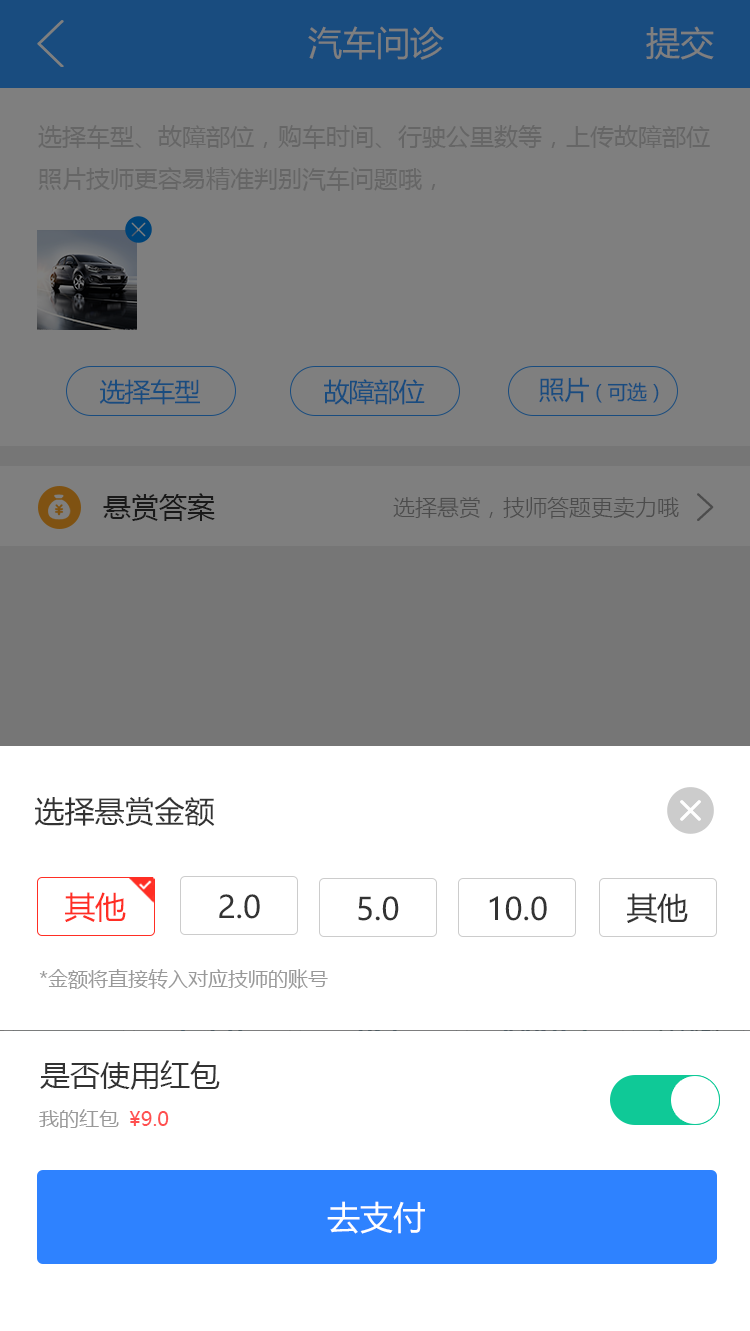
<style>
.page{position:relative;width:750px;height:1331px;background:#ffffff}
.page>*{position:absolute;margin:0}
.t1{font:34px "MicrosoftYaHei";color:#7f7f7f}
.t2{font:24px "MicrosoftYaHei";color:#666666}
.t3{font:20px "MicrosoftYaHei";letter-spacing:-0.04em;color:#194c7f}
.t4{font:26px "MicrosoftYaHei";letter-spacing:-0.04em;color:#194c7f}
.t5{font:28px "MicrosoftYaHei";color:#191919}
.t6{font:22px "MicrosoftYaHeiLight";color:#4c4c4c}
.t7{font:30px "MicrosoftYaHei";color:#333333}
.t8{font:30.7px "MicrosoftYaHei";color:#ff2e24}
.t9{font:30.7px "MicrosoftYaHei";color:#333333}
.t10{font:20px "MicrosoftYaHei";color:#999999}
.t11{font:20px "MicrosoftYaHei";color:#ff5050}
.t12{font:32.9px "MicrosoftYaHei";color:#ffffff}
</style>
<div class="page">
<p class="t1" style="left:308px;top:26px;width:136px;height:34px">汽车问诊</p>
<p class="t1" style="left:646px;top:26px;width:68px;height:34px">提交</p>
<p class="t2" style="left:38px;top:125px;width:672px;height:66px">选择车型、故障部位，购车时间、行驶公里数等，上传故障部位照片技师更容易精准判别汽车问题哦，</p>
<p class="t3" style="left:539px;top:377px;width:120px;height:26px"><span class="t4">照片</span>（可选）</p>
<p class="t4" style="left:99px;top:379px;width:101px;height:26px">选择车型</p>
<p class="t4" style="left:324px;top:379px;width:101px;height:26px">故障部位</p>
<p class="t5" style="left:103px;top:493px;width:112px;height:28px">悬赏答案</p>
<p class="t6" style="left:393px;top:497px;width:286px;height:22px">选择悬赏，技师答题更卖力哦</p>
<p class="t7" style="left:35px;top:797px;width:180px;height:30px">选择悬赏金额</p>
<p class="t8" style="left:65px;top:892px;width:61px;height:30px">其他</p>
<p class="t9" style="left:219px;top:894px;width:41px;height:25px">2.0</p>
<p class="t9" style="left:627px;top:893px;width:61px;height:30px">其他</p>
<p class="t9" style="left:358px;top:896px;width:41px;height:25px">5.0</p>
<p class="t9" style="left:489px;top:896px;width:58px;height:25px">10.0</p>
<p class="t10" style="left:39px;top:969px;width:289px;height:20px">*金额将直接转入对应技师的账号</p>
<p class="t7" style="left:40px;top:1060px;width:180px;height:30px">是否使用红包</p>
<p class="t10" style="left:39px;top:1109px;width:80px;height:19px">我的红包</p>
<p class="t11" style="left:129px;top:1111px;width:40px;height:15px">¥9.0</p>
<p class="t12" style="left:327px;top:1201px;width:98px;height:33px">去支付</p>
</div>
